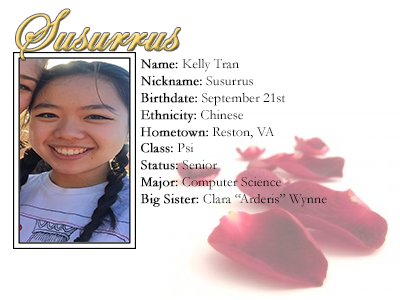
<style>
.page{position:relative;width:400px;height:300px;background:#ffffff}
.page>*{position:absolute;margin:0}
.t1{font:60px "EdwardianScriptITC";font-weight:bold}
.t2{font:14px "Garamond";color:#000000}
.t3{font:14px "Garamond";color:#000000;font-weight:bold}
</style>
<div class="page">
<p class="t1" style="left:16px;top:9px;width:164px;height:51px">Susurrus</p>
<p class="t2" style="left:140px;top:58px;width:187px;height:149px"><span class="t3">Name:</span> Kelly Tran<br><span class="t3">Nickname:</span> Susurrus<br><span class="t3">Birthdate:</span> September 21st<br><span class="t3">Ethnicity:</span> Chinese<br><span class="t3">Hometown:</span> Reston, VA<br><span class="t3">Class:</span> Psi<br><span class="t3">Status:</span> Senior<br><span class="t3">Major:</span> Computer Science<br><span class="t3">Big Sister: </span>Clara “Arderis” Wynne</p>
</div>
